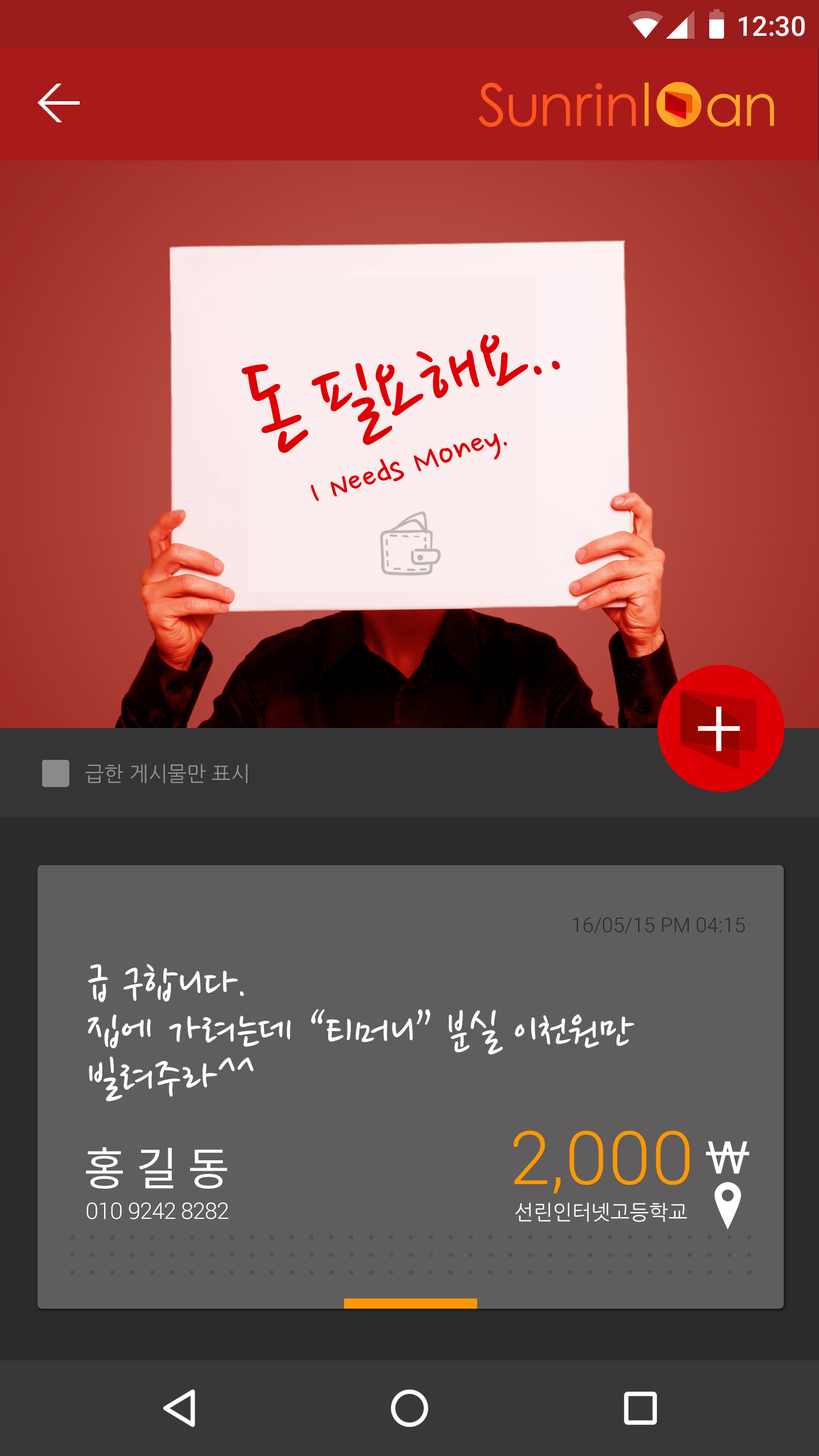
<style>
.page{position:relative;width:819px;height:1456px;background:#5f5d5d}
.page>*{position:absolute;margin:0}
.t1{font:27.3px "Roboto-Medium";color:#ffffff}
.t2{font:20.5px "NanumGothic";color:#919191}
.t3{font:20.5px "Roboto-Light";color:#2b2b2b}
.t4{font:50px/47.2px "NanumPen";color:#ffffff}
.t5{font:73.9px "Roboto-Light";color:#ff9800}
.t6{font:45.5px "NotoSansCJKkr-Regular";color:#ffffff}
.t7{font:22.7px "Roboto-Light";letter-spacing:-0.025em;color:#ffffff}
.t8{font:20.5px "NanumGothic";color:#ffffff}
</style>
<div class="page">
<p class="t1" style="left:739px;top:16px;width:66px;height:20px">12:30</p>
<p class="t2" style="left:85px;top:764px;width:162px;height:19px">급한 게시물만 표시</p>
<p class="t3" style="left:573px;top:917px;width:172px;height:17px">16/05/15 PM 04:15</p>
<p class="t4" style="left:88px;top:964px;width:547px;height:138px">급 구합니다.<br>집에 가려는데 “티머니” 분실 이천원만 <br>빌려주라^^</p>
<p class="t5" style="left:514px;top:1131px;width:176px;height:63px">2,000</p>
<p class="t6" style="left:86px;top:1147px;width:141px;height:42px">홍 길 동</p>
<p class="t7" style="left:86px;top:1202px;width:143px;height:17px">010 9242 8282</p>
<p class="t8" style="left:515px;top:1202px;width:172px;height:20px">선린인터넷고등학교</p>
</div>
